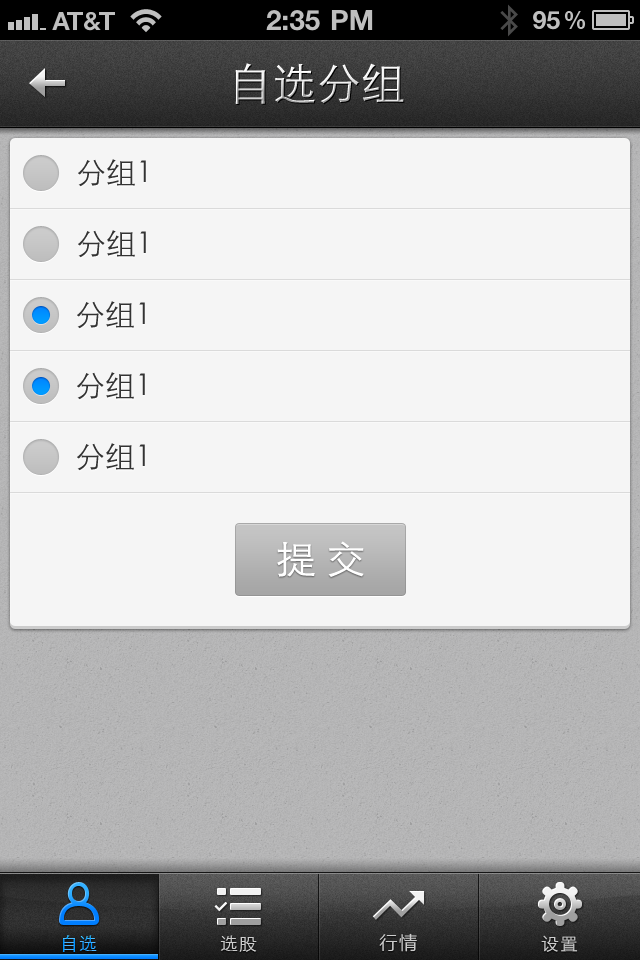
<style>
.page{position:relative;width:640px;height:960px;background:#f5f5f5}
.page>*{position:absolute;margin:0}
.t1{font:44px "STXihei";letter-spacing:0.005em}
.t2{font:30px "STXihei";color:#333333}
.t3{font:38px "STXihei";color:#ffffff;scale:1.05 1}
.t4{font:18px "STXihei";letter-spacing:0.05em}
.t5{font:18px "STXihei";letter-spacing:0.05em;color:#cccccc}
.t6{font:18px "MicrosoftYaHei";letter-spacing:0.1em;color:#cccccc}
</style>
<div class="page">
<p class="t1" style="left:235px;top:63px;width:169px;height:41px">自选分组</p>
<p class="t2" style="left:78px;top:159px;width:68px;height:28px">分组1</p>
<p class="t2" style="left:78px;top:230px;width:68px;height:28px">分组1</p>
<p class="t2" style="left:77px;top:301px;width:68px;height:28px">分组1</p>
<p class="t2" style="left:77px;top:372px;width:68px;height:28px">分组1</p>
<p class="t2" style="left:77px;top:443px;width:68px;height:28px">分组1</p>
<p class="t3" style="left:277px;top:541px;width:87px;height:36px">提 交</p>
<p class="t4" style="left:62px;top:935px;width:35px;height:17px">自选</p>
<p class="t5" style="left:220px;top:935px;width:37px;height:17px">选股</p>
<p class="t6" style="left:379px;top:933px;width:38px;height:19px">行情</p>
<p class="t5" style="left:541px;top:935px;width:37px;height:17px">设置</p>
</div>
